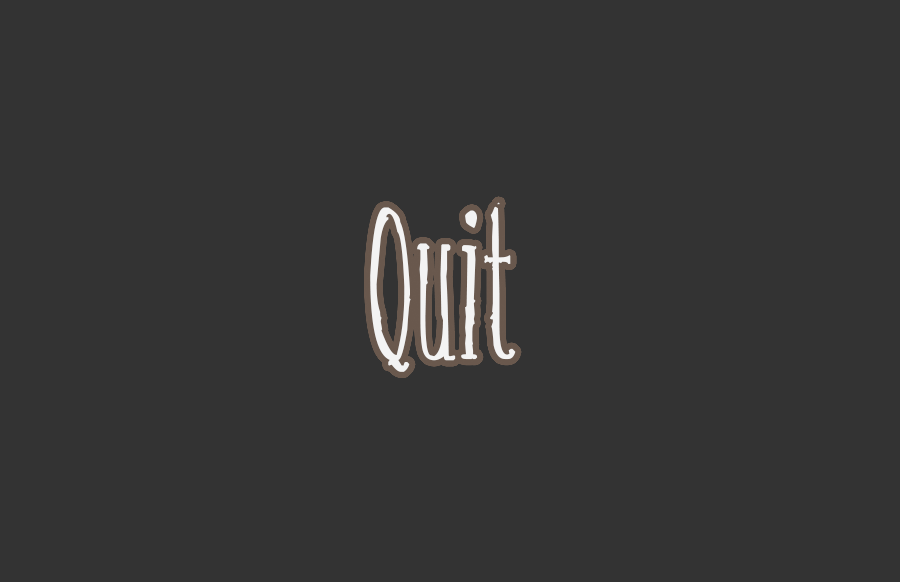
<style>
.page{position:relative;width:900px;height:582px;background:#333333}
.page>*{position:absolute;margin:0}
.t1{font:166.7px "Belisaplumillamanual";color:#f3f3f3}
</style>
<div class="page">
<p class="t1" style="left:370px;top:202px;width:146px;height:170px">Quit</p>
</div>
